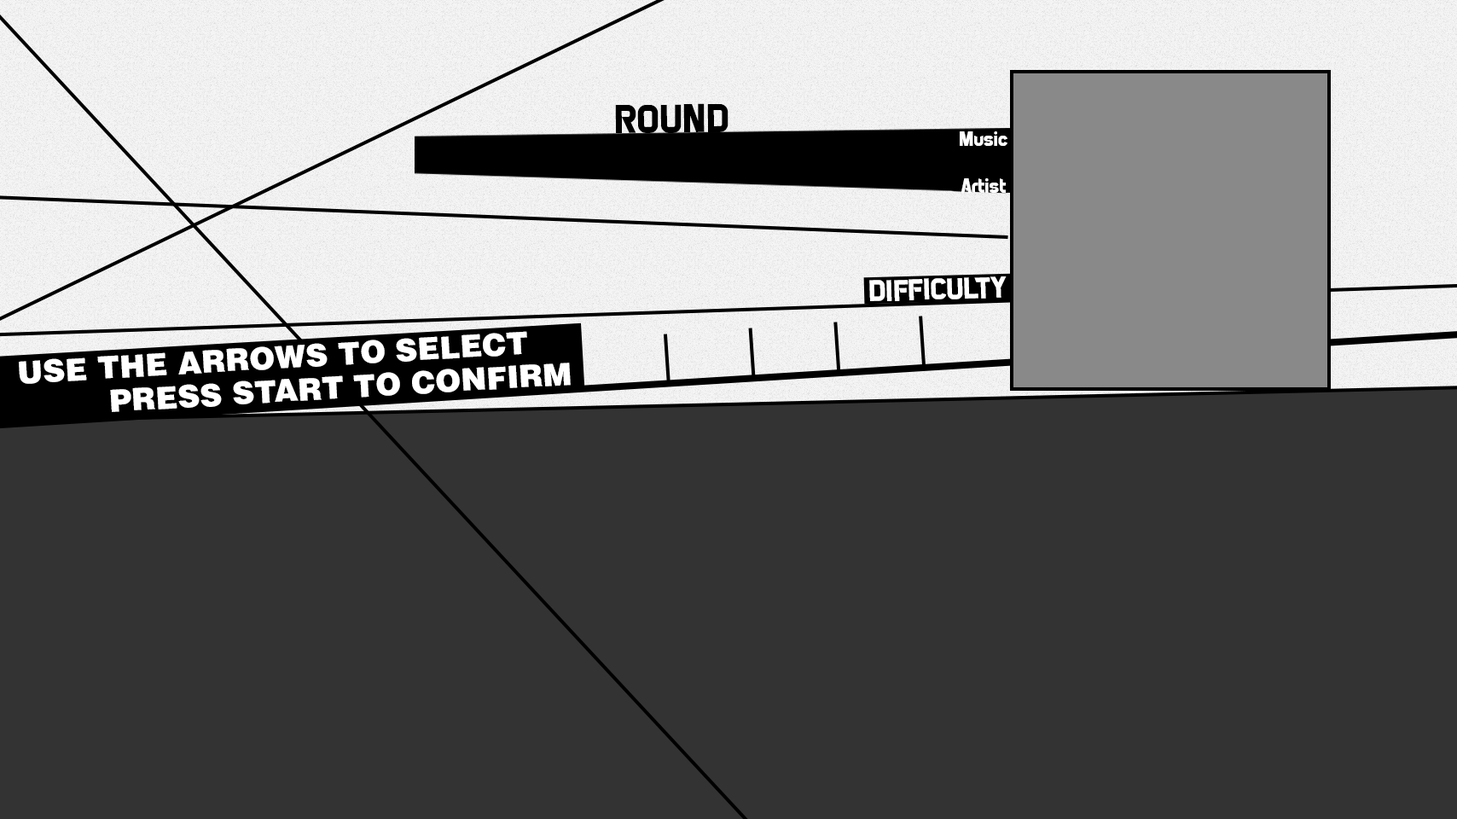
<style>
.page{position:relative;width:1457px;height:819px;background:#333333}
.page>*{position:absolute;margin:0}
.t1{font:20.5px "PiratesofCydonia";color:#ffffff}
.t2{font:30.7px "HelveticaLTStd-Blk";color:#ffffff}
</style>
<div class="page">
<p class="t1" style="left:959px;top:131px;width:48px;height:15px">Music</p>
<p class="t1" style="left:960px;top:178px;width:45px;height:15px">Artist</p>
<p class="t2" style="left:19px;top:331px;width:508px;height:53px;rotate:-3deg">USE THE ARROWS TO SELECT</p>
<p class="t2" style="left:110px;top:362px;width:461px;height:50px;rotate:-3deg">PRESS START TO CONFIRM</p>
</div>
